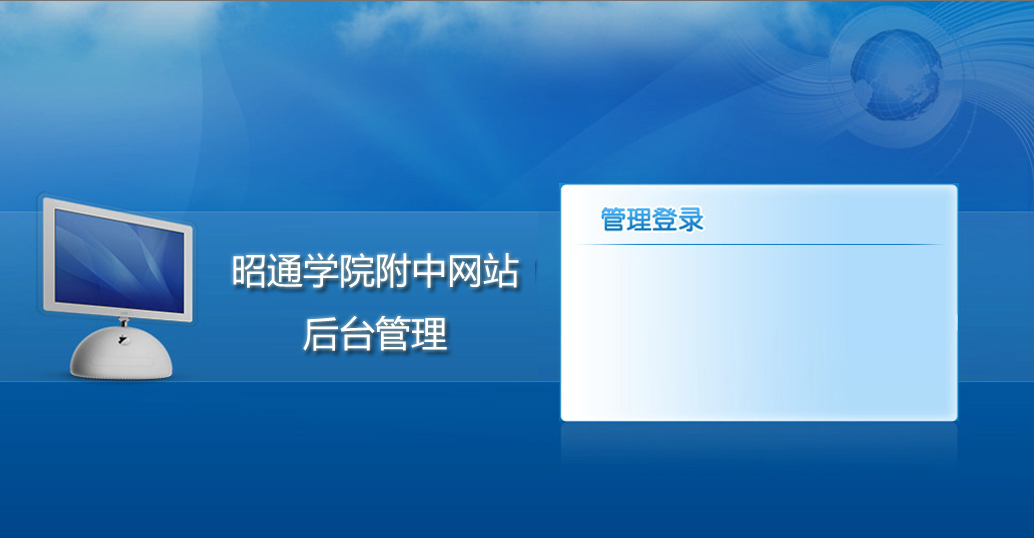
<style>
.page{position:relative;width:1034px;height:538px}
.page>*{position:absolute;margin:0}
.t1{font:36px "MicrosoftYaHei";color:#ffffff}
</style>
<div class="page">
<p class="t1" style="left:233px;top:252px;width:286px;height:99px;text-align:center">昭通学院附中网站<br>后台管理</p>
</div>
